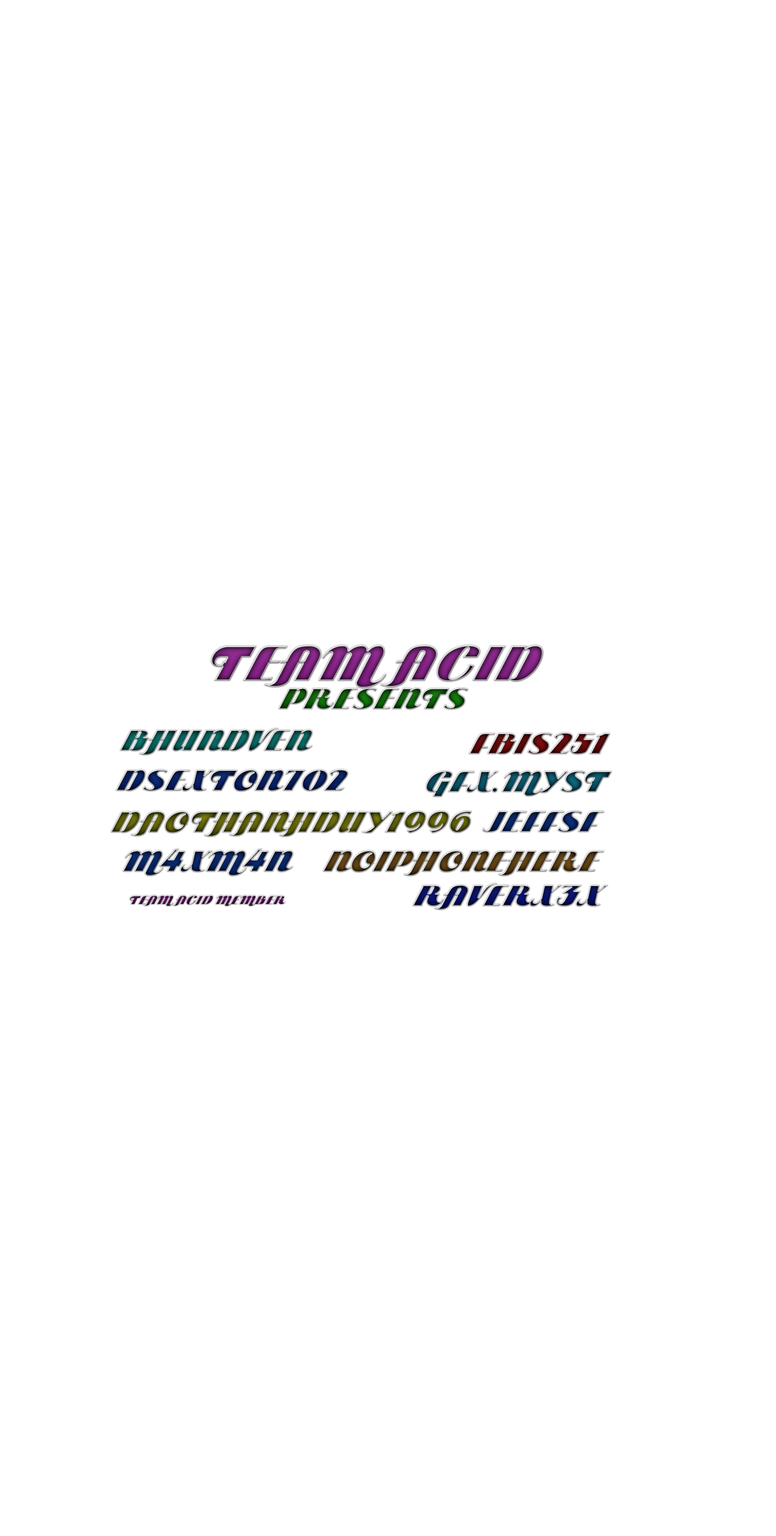
<style>
.page{position:relative;width:776px;height:1536px;background:#ffffff}
.page>*{position:absolute;margin:0}
.t1{font:48.5px "ARB85PosterScriptJAN-39Normal"}
.t2{font:29.1px "ARB85PosterScriptJAN-39Normal"}
.t3{font:12.1px "ARB85PosterScriptJAN-39Normal"}
</style>
<div class="page">
<p class="t1" style="left:211px;top:645px;width:332px;height:43px">TEAM ACID</p>
<p class="t2" style="left:278px;top:688px;width:191px;height:21px">PRESENTS</p>
<p class="t2" style="left:120px;top:728px;width:193px;height:27px">BHUNDVEN</p>
<p class="t2" style="left:469px;top:733px;width:141px;height:21px">FBIS251</p>
<p class="t2" style="left:116px;top:769px;width:232px;height:23px">DSEXTON702</p>
<p class="t2" style="left:426px;top:771px;width:186px;height:26px">GFX.MYST</p>
<p class="t2" style="left:110px;top:811px;width:362px;height:26px">DAOTHANHDUY1996</p>
<p class="t2" style="left:483px;top:811px;width:122px;height:21px">JEFFSF</p>
<p class="t2" style="left:122px;top:849px;width:171px;height:27px">M4XM4N</p>
<p class="t2" style="left:323px;top:851px;width:281px;height:25px">NOIPHONEHERE</p>
<p class="t2" style="left:412px;top:883px;width:197px;height:27px">RAVERX3X</p>
<p class="t3" style="left:130px;top:895px;width:156px;height:11px">TEAM ACID MEMBER</p>
</div>
